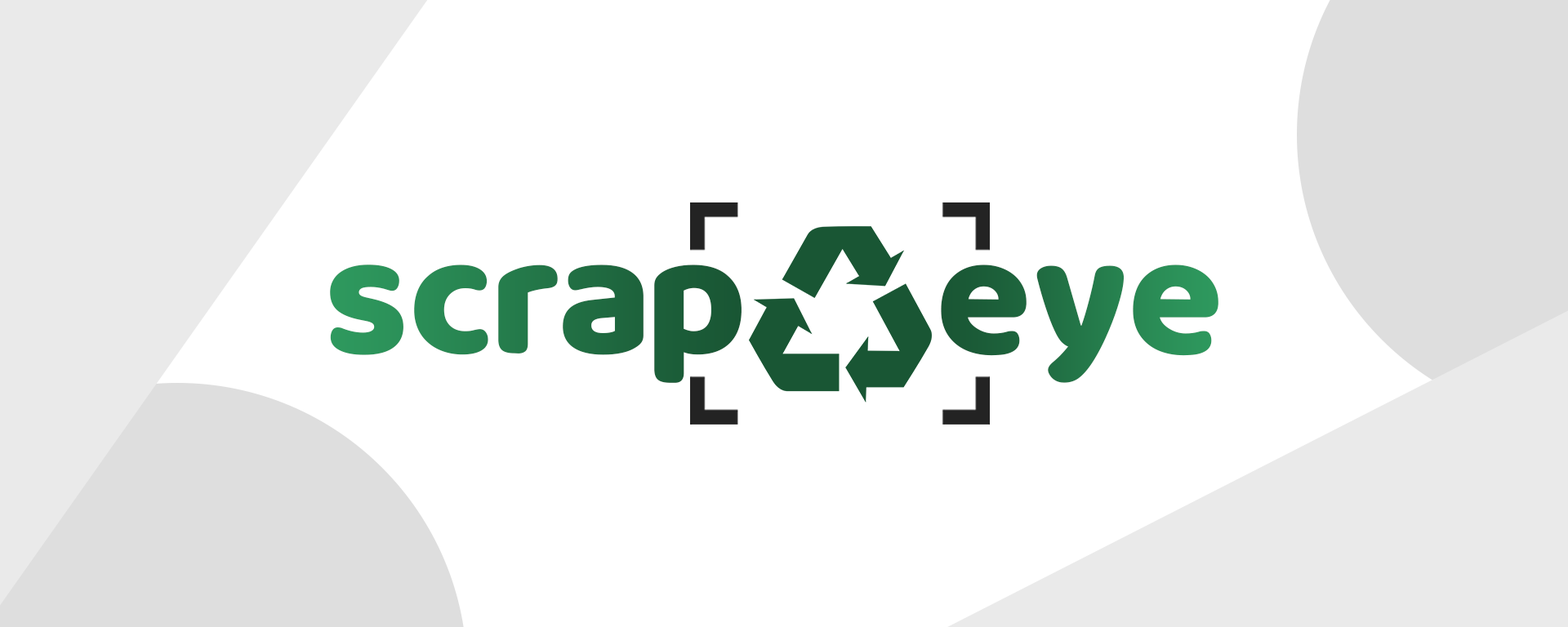
<style>
.page{position:relative;width:1568px;height:627px;background:#ffffff}
.page>*{position:absolute;margin:0}
.t1{font:173.7px "Quentin_Pro-Regular";letter-spacing:0.03em}
</style>
<div class="page">
<p class="t1" style="left:330px;top:265px;width:412px;height:118px">scrap</p>
<p class="t1" style="left:941px;top:265px;width:277px;height:118px">eye</p>
</div>
